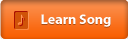
<style>
.page{position:relative;width:128px;height:39px}
.page>*{position:absolute;margin:0}
.t1{font:14px "MyriadPro-Bold";color:#ffffff}
</style>
<div class="page">
<p class="t1" style="left:41px;top:14px;width:70px;height:13px">Learn Song</p>
</div>
